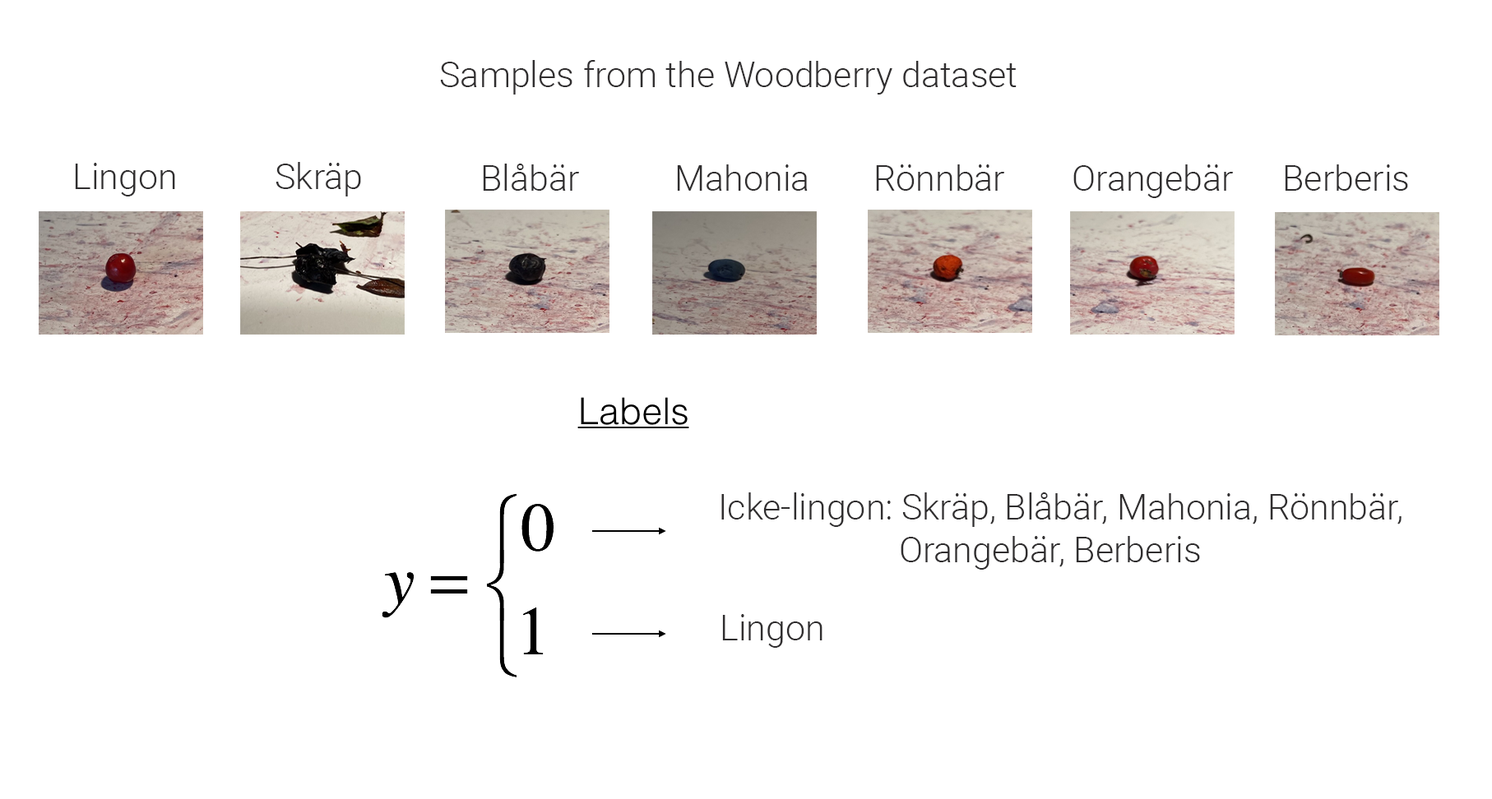
<style>
.page{position:relative;width:1492px;height:799px;background:#ffffff}
.page>*{position:absolute;margin:0}
.t1{font:35.4px "Roboto-Light";color:#302e2f}
</style>
<div class="page">
<p class="t1" style="left:440px;top:60px;width:576px;height:35px">Samples from the Woodberry dataset</p>
<p class="t1" style="left:75px;top:163px;width:100px;height:34px">Lingon</p>
<p class="t1" style="left:275px;top:162px;width:86px;height:35px">Skräp</p>
<p class="t1" style="left:483px;top:164px;width:96px;height:27px">Blåbär</p>
<p class="t1" style="left:677px;top:164px;width:131px;height:27px">Mahonia</p>
<p class="t1" style="left:876px;top:164px;width:128px;height:27px">Rönnbär</p>
<p class="t1" style="left:1073px;top:164px;width:160px;height:34px">Orangebär</p>
<p class="t1" style="left:1285px;top:164px;width:123px;height:27px">Berberis</p>
<p class="t1" style="left:721px;top:493px;width:680px;height:77px">Icke-lingon: Skräp, Blåbär, Mahonia, Rönnbär, <br>                     Orangebär, Berberis</p>
<p class="t1" style="left:722px;top:614px;width:100px;height:34px">Lingon</p>
</div>
